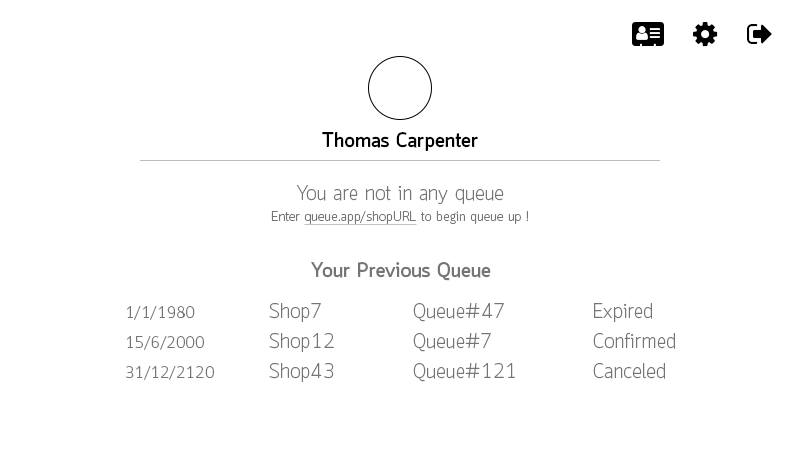
<style>
.page{position:relative;width:800px;height:450px;background:#ffffff}
.page>*{position:absolute;margin:0}
.t1{font:20.7px "Quark-Bold";letter-spacing:0.011em;color:#000000}
.t2{font:20.7px "Quark-Light";letter-spacing:0.011em;color:#757575}
.t3{font:14px "Quark-Light";letter-spacing:0.011em;color:#757575}
.t4{font:14px "Quark-Light";letter-spacing:0.011em;color:#757575;text-decoration:underline}
.t5{font:20.7px "Quark-Bold";letter-spacing:0.011em;color:#757575}
.t6{font:20.7px/30px "Quark-Light";letter-spacing:0.011em;color:#757575}
.t7{font:16px/30px "Quark-Light";letter-spacing:0.011em;color:#757575}
</style>
<div class="page">
<p class="t1" style="left:322px;top:132px;width:156px;height:19px">Thomas Carpenter</p>
<p class="t2" style="left:296px;top:185px;width:208px;height:20px">You are not in any queue</p>
<p class="t3" style="left:271px;top:211px;width:258px;height:14px">Enter <span class="t4">queue.app/shopURL</span> to begin queue up !</p>
<p class="t5" style="left:311px;top:262px;width:180px;height:19px">Your Previous Queue</p>
<p class="t6" style="left:126px;top:303px;width:549px;height:79px"><span class="t7">1/1/1980</span>   Shop7   Queue#47   Expired<br><span class="t7">15/6/2000</span>  Shop12   Queue#7   Confirmed<br><span class="t7">31/12/2120</span>  Shop43   Queue#121   Canceled</p>
</div>
